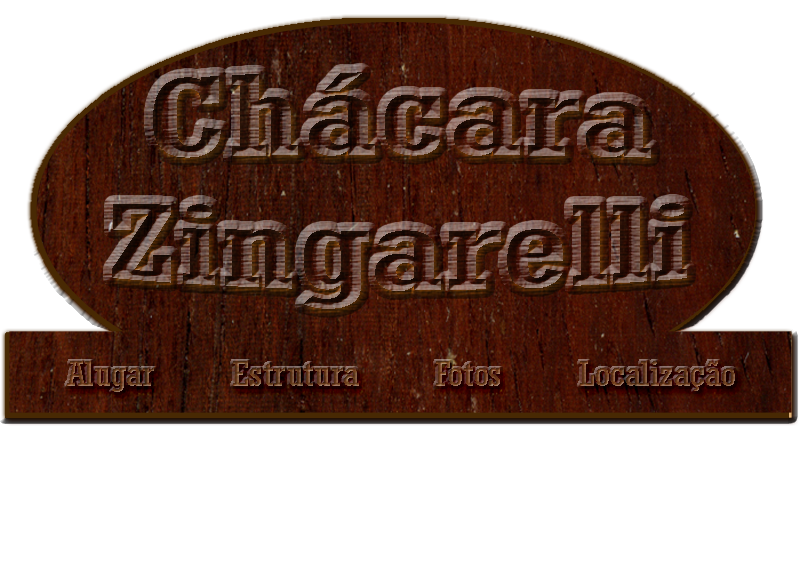
<style>
.page{position:relative;width:800px;height:571px;background:#ffffff}
.page>*{position:absolute;margin:0}
.t1{font:34.3px "Rockwell-Condensed";scale:1.25 1}
</style>
<div class="page">
<p class="t1" style="left:67px;top:361px;width:87px;height:31px">Alugar</p>
<p class="t1" style="left:233px;top:361px;width:126px;height:25px">Estrutura</p>
<p class="t1" style="left:436px;top:361px;width:64px;height:25px">Fotos</p>
<p class="t1" style="left:580px;top:361px;width:155px;height:30px">Localização</p>
</div>
